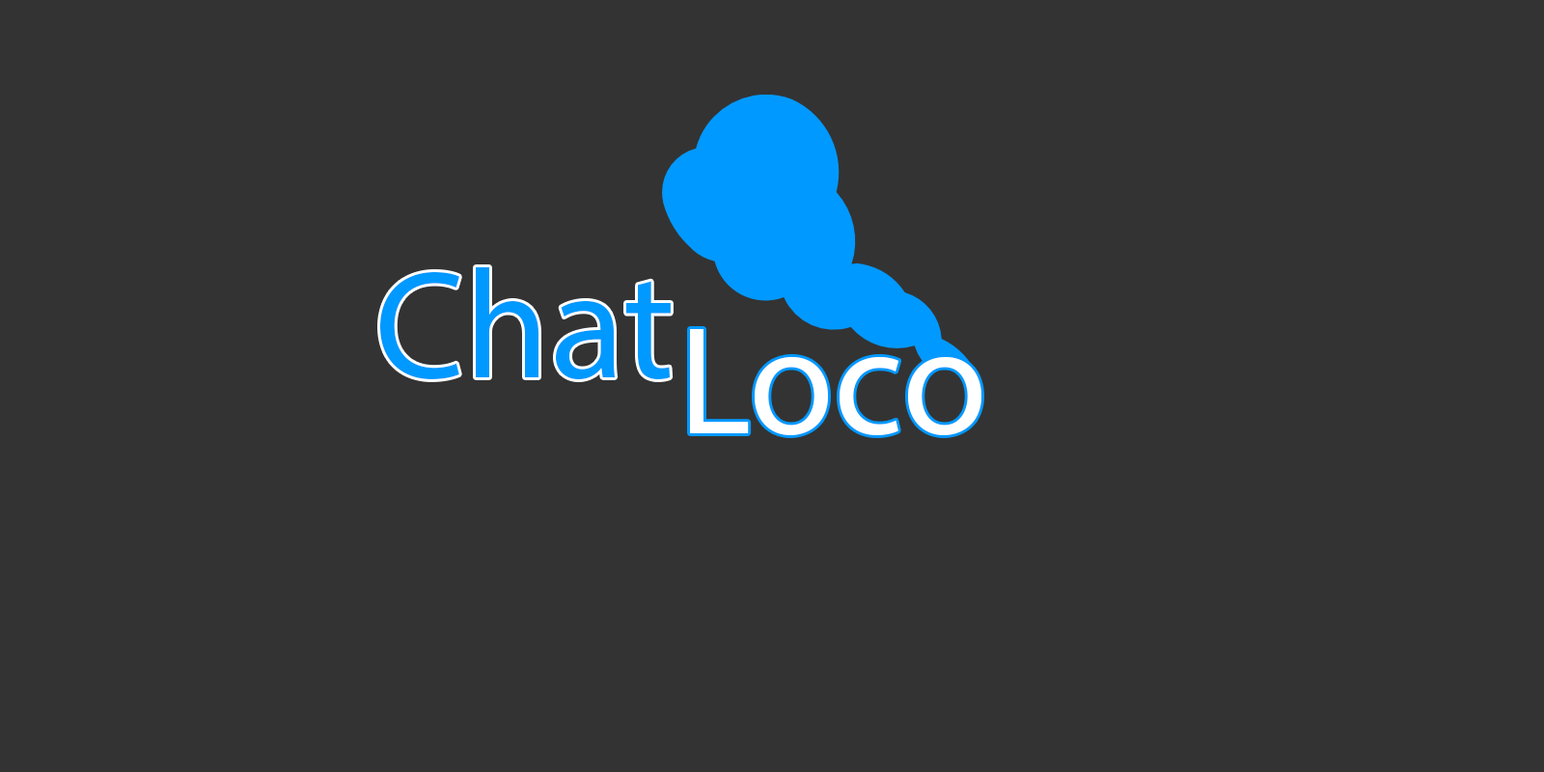
<style>
.page{position:relative;width:1544px;height:772px;background:#333333}
.page>*{position:absolute;margin:0}
.t1{font:154.4px "MyriadHebrew-Regular";color:#0099ff}
.t2{font:154.4px "MyriadHebrew-Regular";color:#ffffff}
</style>
<div class="page">
<p class="t1" style="left:380px;top:267px;width:291px;height:113px">Chat</p>
<p class="t2" style="left:690px;top:329px;width:292px;height:106px">Loco</p>
</div>
